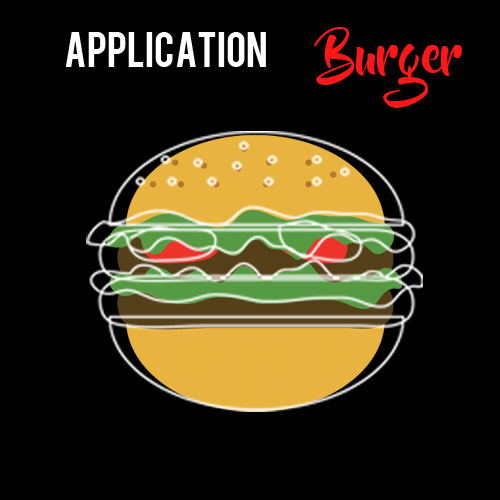
<style>
.page{position:relative;width:500px;height:500px;background:#020101}
.page>*{position:absolute;margin:0}
.t1{font:51.9px "BeyondTheMountains";color:#ff1616}
.t2{font:39.2px "Bebas";color:#ffffff}
</style>
<div class="page">
<p class="t1" style="left:314px;top:27px;width:148px;height:81px">Burger</p>
<p class="t2" style="left:66px;top:32px;width:200px;height:35px">Application</p>
</div>
